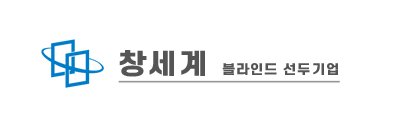
<style>
.page{position:relative;width:400px;height:130px;background:#ffffff}
.page>*{position:absolute;margin:0}
.t1{font:27px "S-CoreDream-8Heavy";letter-spacing:0.05em;color:#555555;scale:1.11 1}
.t2{font:12.6px "S-CoreDream-8Heavy";letter-spacing:0.05em;color:#555555;scale:1.11 1}
</style>
<div class="page">
<p class="t1" style="left:119px;top:50px;width:86px;height:27px">창세계</p>
<p class="t2" style="left:222px;top:63px;width:116px;height:12px">블라인드 선두기업</p>
</div>
